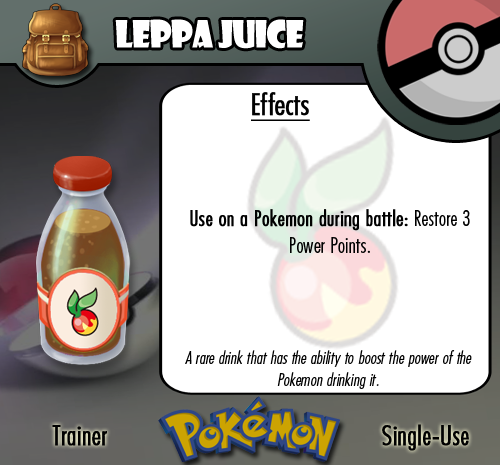
<style>
.page{position:relative;width:500px;height:465px;background:#ffffff}
.page>*{position:absolute;margin:0}
.t1{font:36.7px "ShowcardGothic-Reg";letter-spacing:-0.025em;color:#ffffff;scale:0.91 1}
.t2{font:22.2px "FuturaCondensedBQ-Light";color:#010101;font-weight:bold}
.t3{font:27.8px "FuturaCondensedBQ-Light";color:#010101;font-weight:bold}
.t4{font:30.6px "FuturaCondensedBQ-Light";color:#010101;font-weight:bold;text-decoration:underline}
.t5{font:22.2px "FuturaCondensedBQ-Light";color:#010101}
.t6{font:18.1px "FuturaCondensedBQ-Light";color:#010101;font-style:italic}
</style>
<div class="page">
<p class="t1" style="left:115px;top:19px;width:189px;height:30px">Leppa Juice</p>
<p class="t2" style="left:190px;top:92px;width:280px;height:161px"><span class="t3">  </span><span class="t4">Effects<br><br><br><br><br><br></span>Use on a Pokemon during battle: <span class="t5">Restore 3 Power Points.</span></p>
<p class="t6" style="left:185px;top:350px;width:287px;height:39px;text-align:center">A rare drink that has the ability to boost the power of the Pokemon drinking it.</p>
<p class="t3" style="left:52px;top:425px;width:55px;height:21px">Trainer</p>
<p class="t3" style="left:382px;top:424px;width:87px;height:27px">Single-Use</p>
</div>
